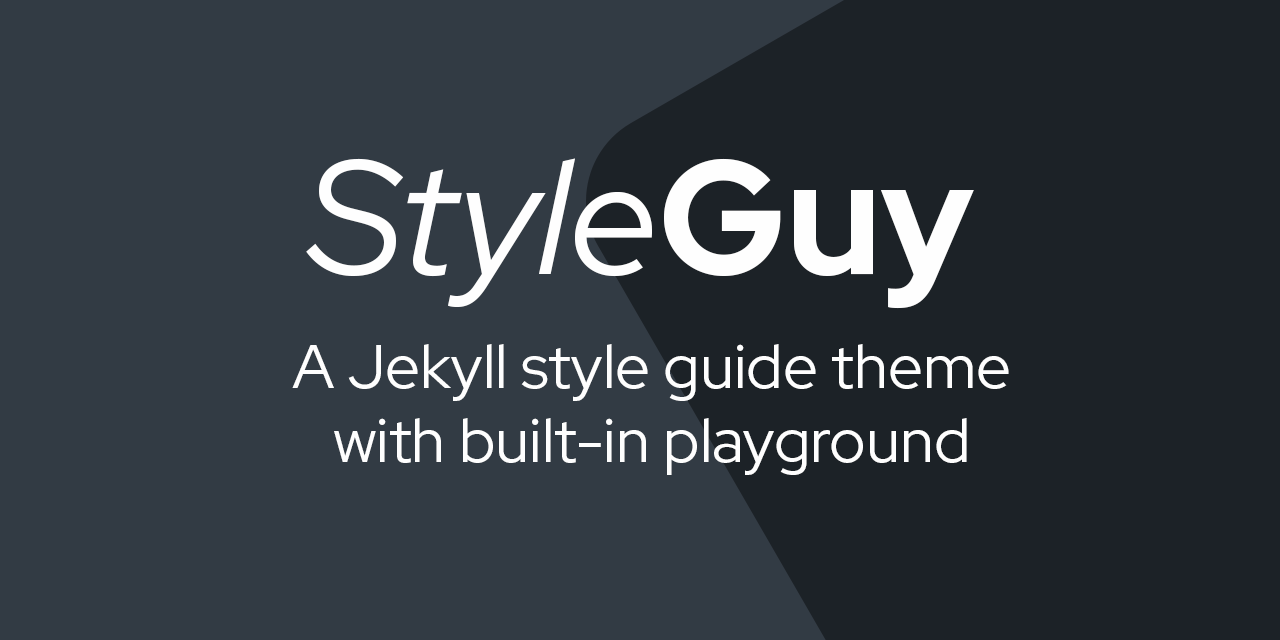
<style>
.page{position:relative;width:1280px;height:640px;background:#323b44}
.page>*{position:absolute;margin:0}
.t1{font:161px "RedHatDisplay-Italic";color:#fefefe}
.t2{font:161px "RedHatDisplay-Bold";color:#fefefe}
.t3{font:62px "RedHatDisplay-Regular";color:#fefefe}
</style>
<div class="page">
<p class="t1" style="left:306px;top:158px;width:668px;height:151px">Style<span class="t2">Guy</span></p>
<p class="t3" style="left:292px;top:344px;width:717px;height:131px;text-align:center">A Jekyll style guide theme<br>with built-in playground</p>
</div>
